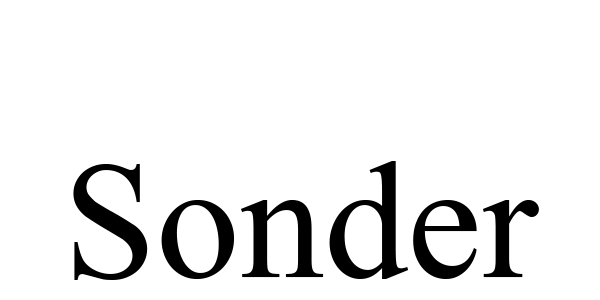
<style>
.page{position:relative;width:600px;height:300px;background:#ffffff}
.page>*{position:absolute;margin:0}
.t1{font:250px "Microsoft-Himalaya";color:#000000}
</style>
<div class="page">
<p class="t1" style="left:73px;top:161px;width:466px;height:119px">Sonder</p>
</div>
